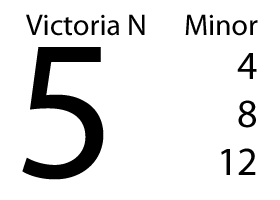
<style>
.page{position:relative;width:280px;height:200px;background:#ffffff}
.page>*{position:absolute;margin:0}
.t1{font:30px "MyriadPro-Regular";color:#000000}
.t2{font:200px "MyriadPro-Regular";color:#000000}
.t3{font:40px "MyriadPro-Regular";color:#000000}
</style>
<div class="page">
<p class="t1" style="left:26px;top:14px;width:119px;height:22px">Victoria N</p>
<p class="t1" style="left:185px;top:14px;width:73px;height:22px">Minor</p>
<p class="t2" style="left:22px;top:47px;width:82px;height:133px">5</p>
<p class="t3" style="left:221px;top:53px;width:36px;height:122px;text-align:right">4<br>8<br>12</p>
</div>
